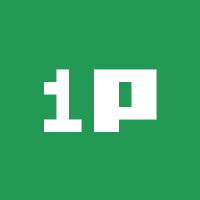
<style>
.page{position:relative;width:200px;height:200px;background:#229954}
.page>*{position:absolute;margin:0}
.t1{font:100px "I-pixel-u";color:#ffffff}
</style>
<div class="page">
<p class="t1" style="left:44px;top:69px;width:113px;height:63px">1P</p>
</div>
